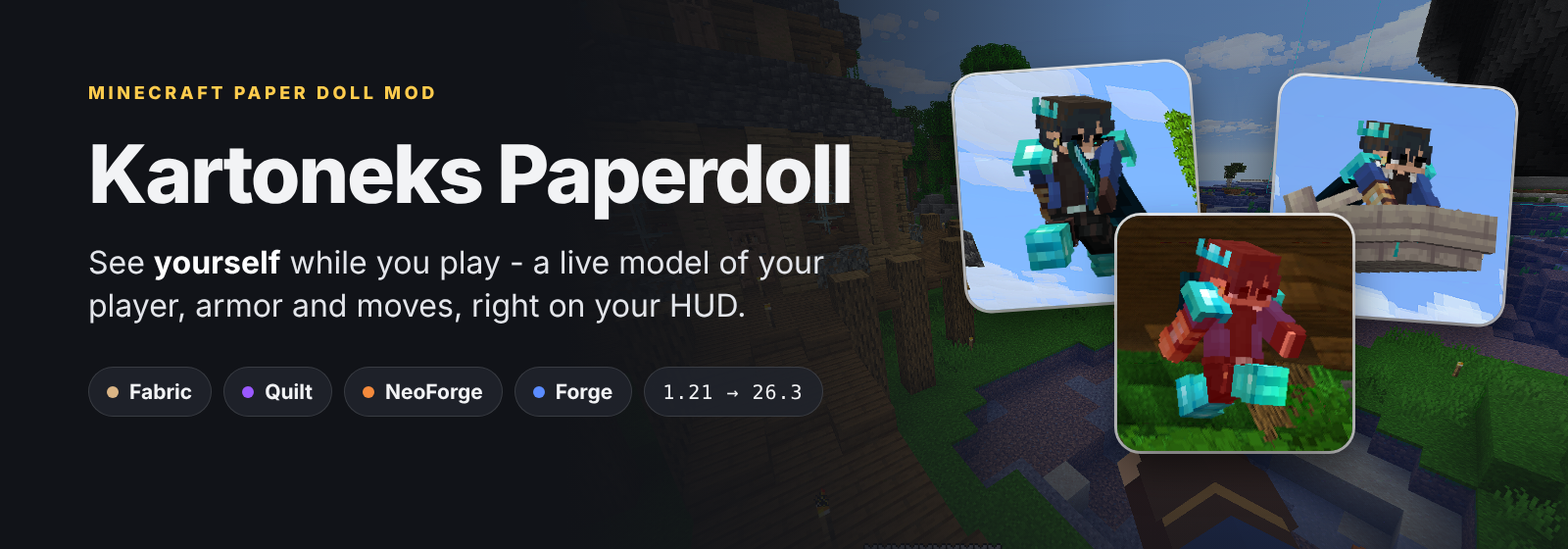
<style>
.page{position:relative;width:1568px;height:549px;background:#111318}
.page>*{position:absolute;margin:0}
.t1{font:17.6px "Inter-ExtraBold";letter-spacing:0.2em;color:#ffcc4d}
.t2{font:80.4px "Inter-ExtraBold";letter-spacing:-0.029em;color:#f2f3f5}
.t3{font:31.4px/43.1px "Inter-Regular";color:#e3e5ea}
.t4{font:31.4px/43.1px "Inter-Bold";color:#ffffff}
.t5{font:20.6px "Inter-Bold";color:#f2f3f5}
.t6{font:19.6px "DejaVuSansMono";letter-spacing:0.05em;color:#f2f3f5}
</style>
<div class="page">
<p class="t1" style="left:89px;top:85px;width:345px;height:15px">MINECRAFT PAPER DOLL MOD</p>
<p class="t2" style="left:92px;top:144px;width:758px;height:76px">Kartoneks Paperdoll</p>
<p class="t3" style="left:89px;top:249px;width:735px;height:74px">See <span class="t4">yourself</span> while you play - a live model of your player, armor and moves, right on your HUD.</p>
<p class="t5" style="left:130px;top:383px;width:62px;height:17px">Fabric</p>
<p class="t5" style="left:266px;top:383px;width:47px;height:18px">Quilt</p>
<p class="t5" style="left:386px;top:383px;width:96px;height:21px">NeoForge</p>
<p class="t5" style="left:557px;top:383px;width:55px;height:21px">Forge</p>
<p class="t6" style="left:664px;top:384px;width:137px;height:16px">1.21 → 26.3</p>
</div>
